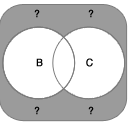
<style>
.page{position:relative;width:128px;height:128px;background:#ffffff}
.page>*{position:absolute;margin:0}
.t1{font:10px "Helvetica";color:#000000;font-weight:bold}
.t2{font:10px "Helvetica";font-weight:bold}
</style>
<div class="page">
<p class="t1" style="left:34px;top:9px;width:6px;height:9px">?</p>
<p class="t1" style="left:88px;top:9px;width:6px;height:9px">?</p>
<p class="t1" style="left:36px;top:58px;width:7px;height:9px">B</p>
<p class="t2" style="left:86px;top:58px;width:7px;height:9px">C</p>
<p class="t1" style="left:34px;top:106px;width:6px;height:9px">?</p>
<p class="t1" style="left:88px;top:106px;width:6px;height:9px">?</p>
</div>
